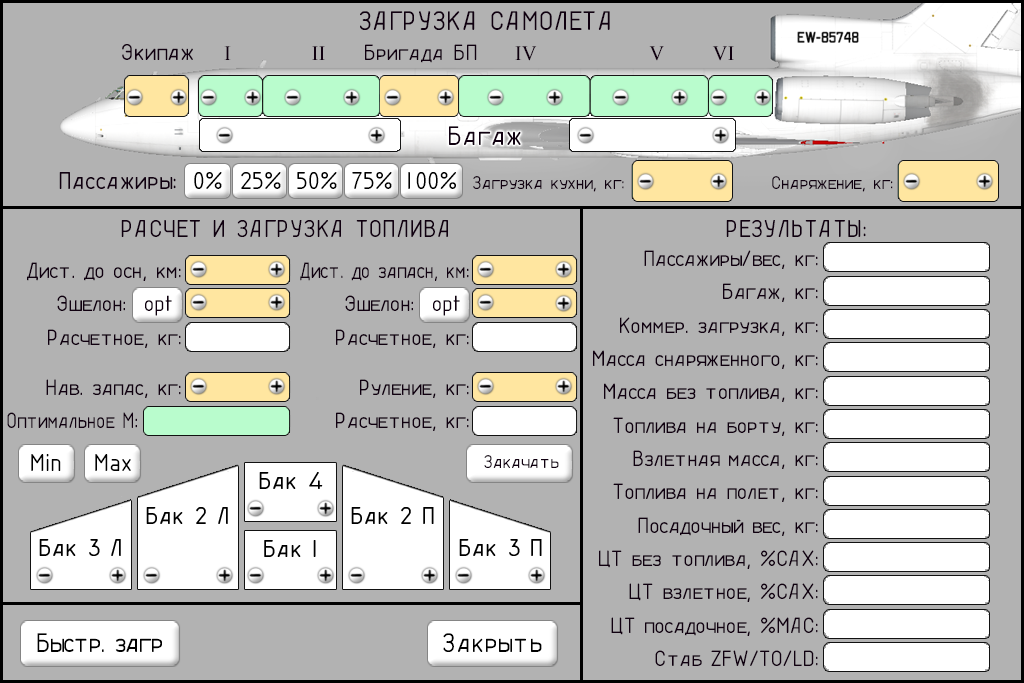
<style>
.page{position:relative;width:1024px;height:683px;background:#b2b2b2}
.page>*{position:absolute;margin:0}
.t1{font:29.2px "LENYA69";color:#100010}
.t2{font:25px "LENYA69";color:#100010}
.t3{font:20.8px "TimesNewRomanPSMT";color:#100010}
.t4{font:24px "LENYA69";color:#100010}
.t5{font:26.4px "LENYA69";color:#100010}
.t6{font:26.4px "LENYA69";color:#000000}
.t7{font:20px "LENYA69";letter-spacing:-0.025em;color:#100010}
.t8{font:24px/16.7px "LENYA69";letter-spacing:-0.025em;color:#100010}
.t9{font:24px/16.7px "LENYA69";letter-spacing:-0.025em;color:#100010;scale:0.9 1}
.t10{font:29.2px "LENYA69";letter-spacing:-0.05em;color:#000000}
.t11{font:29.2px "LENYA69";color:#000000}
</style>
<div class="page">
<p class="t1" style="left:360px;top:11px;width:250px;height:19px">ЗАГРУЗКА САМОЛЕТА</p>
<p class="t2" style="left:122px;top:44px;width:71px;height:16px">Экипаж</p>
<p class="t3" style="left:224px;top:46px;width:7px;height:14px">I</p>
<p class="t3" style="left:312px;top:46px;width:13px;height:14px">II</p>
<p class="t4" style="left:365px;top:44px;width:112px;height:19px">Бригада БП</p>
<p class="t3" style="left:515px;top:46px;width:22px;height:15px">IV</p>
<p class="t3" style="left:649px;top:46px;width:15px;height:15px">V</p>
<p class="t3" style="left:712px;top:46px;width:22px;height:15px">VI</p>
<p class="t1" style="left:449px;top:126px;width:72px;height:19px">Багаж</p>
<p class="t5" style="left:59px;top:172px;width:117px;height:17px">Пассажиры:</p>
<p class="t6" style="left:194px;top:172px;width:28px;height:17px">0%</p>
<p class="t6" style="left:241px;top:172px;width:40px;height:17px">25%</p>
<p class="t6" style="left:297px;top:172px;width:40px;height:17px">50%</p>
<p class="t6" style="left:352px;top:172px;width:40px;height:17px">75%</p>
<p class="t6" style="left:408px;top:172px;width:48px;height:17px">100%</p>
<p class="t7" style="left:473px;top:176px;width:151px;height:16px">Загрузка кухни, кг:</p>
<p class="t7" style="left:772px;top:176px;width:121px;height:16px">Снаряжение, кг:</p>
<p class="t5" style="left:121px;top:220px;width:327px;height:17px">РАСЧЕТ И ЗАГРУЗКА ТОПЛИВА</p>
<p class="t5" style="left:726px;top:220px;width:140px;height:17px">РЕЗУЛЬТАТЫ:</p>
<p class="t8" style="left:593px;top:250px;width:225px;height:416px;text-align:right">Пассажиры/вес, кг:<br><br>Багаж, кг:<br><br>Коммер. загрузка, кг:<br><br>Масса снаряженного, кг:<br><br>Масса без топлива, кг:<br><br>Топлива на борту, кг:<br><br>Взлетная масса, кг:<br><br>Топлива на полет, кг:<br><br>Посадочный вес, кг:<br><br>ЦТ без топлива, %САХ:<br><br>ЦТ взлетное, %САХ:<br><br>ЦТ посадочное, %MAC:<br><br>Стаб ZFW/TO/LD:</p>
<p class="t8" style="left:7px;top:262px;width:174px;height:166px;text-align:right">Дист. до осн, км:<br><br>Эшелон:  opt <br><br>Расчетное, кг:<br><br><br>Нав. запас, кг:<br><br><span class="t9">Оптимальное М</span>:</p>
<p class="t8" style="left:300px;top:262px;width:169px;height:169px;text-align:right"><span class="t9">Дист. до запасн, км</span>:<br><br>Эшелон:  opt <br><br>Расчетное, кг:<br><br><br>Руление, кг:<br><br>Расчетное, кг:</p>
<p class="t6" style="left:31px;top:454px;width:30px;height:17px">Min</p>
<p class="t6" style="left:95px;top:454px;width:36px;height:17px">Max</p>
<p class="t7" style="left:484px;top:455px;width:75px;height:13px">Закачать</p>
<p class="t6" style="left:259px;top:472px;width:64px;height:17px">Бак 4</p>
<p class="t6" style="left:146px;top:507px;width:82px;height:17px">Бак 2 Л</p>
<p class="t6" style="left:351px;top:507px;width:83px;height:17px">Бак 2 П</p>
<p class="t6" style="left:39px;top:539px;width:82px;height:17px">Бак 3 Л</p>
<p class="t6" style="left:264px;top:540px;width:52px;height:17px">Бак 1</p>
<p class="t6" style="left:459px;top:539px;width:83px;height:17px">Бак 3 П</p>
<p class="t10" style="left:37px;top:633px;width:125px;height:19px">Быстр. загр</p>
<p class="t11" style="left:443px;top:633px;width:99px;height:19px">Закрыть</p>
</div>
